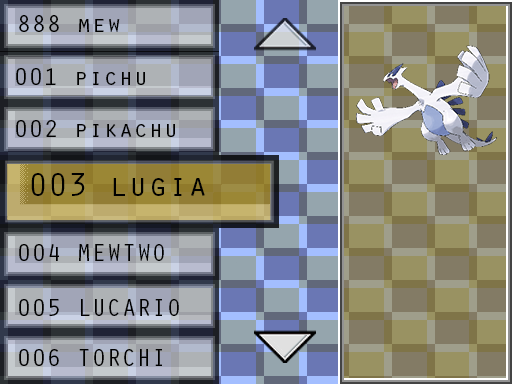
<style>
.page{position:relative;width:512px;height:384px}
.page>*{position:absolute;margin:0}
.t1{font:25px "OratorStd";color:#000000}
.t2{font:33.3px "OratorStd";color:#000000}
</style>
<div class="page">
<p class="t1" style="left:19px;top:15px;width:101px;height:17px">888 mew</p>
<p class="t1" style="left:16px;top:68px;width:129px;height:17px">001 pichu</p>
<p class="t1" style="left:16px;top:120px;width:159px;height:17px">002 pikachu</p>
<p class="t2" style="left:31px;top:173px;width:174px;height:23px">003 lugia</p>
<p class="t1" style="left:19px;top:244px;width:145px;height:17px">004 MEWTWO</p>
<p class="t1" style="left:19px;top:299px;width:160px;height:17px">005 LUCARIO</p>
<p class="t1" style="left:19px;top:349px;width:143px;height:17px">006 TORCHI</p>
</div>
